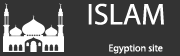
<style>
.page{position:relative;width:180px;height:56px;background:#333333}
.page>*{position:absolute;margin:0}
.t1{font:10px/26.9px "MyriadPro-Regular";color:#ffffff}
.t2{font:30.1px/26.9px "MyriadPro-Regular";color:#ffffff}
</style>
<div class="page">
<p class="t1" style="left:88px;top:3px;width:76px;height:51px"><span class="t2">ISLAM<br></span>Egyption site</p>
</div>
